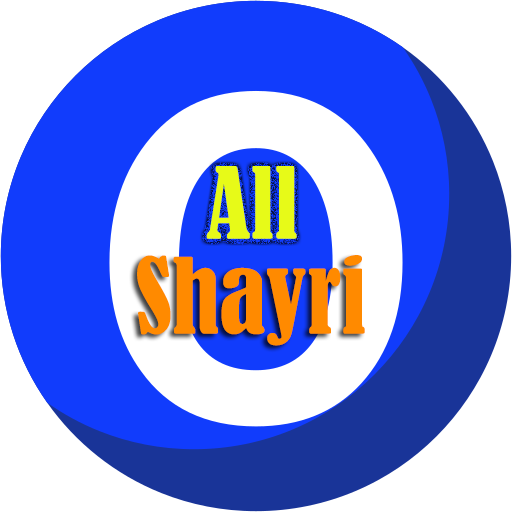
<style>
.page{position:relative;width:512px;height:512px;background:#ffffff}
.page>*{position:absolute;margin:0}
.t1{font:92px "BernardMT-Condensed";color:#e7fa18}
.t2{font:97.3px "BernardMT-Condensed";color:#ff8a00}
</style>
<div class="page">
<p class="t1" style="left:206px;top:166px;width:91px;height:73px">All</p>
<p class="t2" style="left:137px;top:255px;width:228px;height:91px">Shayri</p>
</div>
